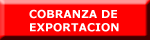
<style>
.page{position:relative;width:150px;height:40px;background:#ff0000}
.page>*{position:absolute;margin:0}
.t1{font:11px "Verdana-Bold";color:#ffffff}
</style>
<div class="page">
<p class="t1" style="left:29px;top:9px;width:90px;height:23px">COBRANZA DE<br>EXPORTACION</p>
</div>
